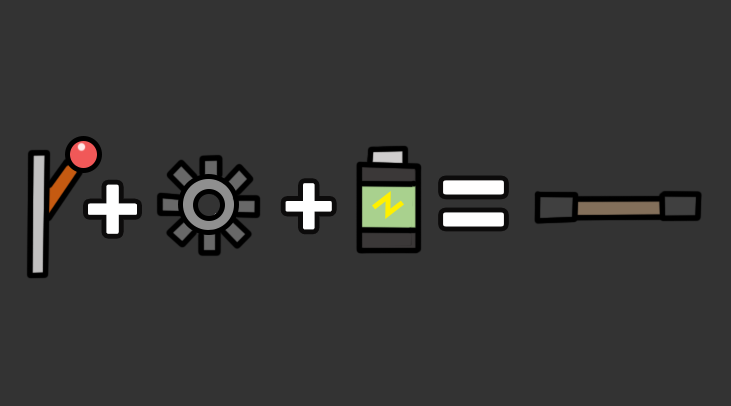
<style>
.page{position:relative;width:731px;height:406px;background:#333333}
.page>*{position:absolute;margin:0}
.t1{font:97px "CookieRun-Regular";letter-spacing:-0.02em;color:#ffffff}
.t2{font:91px "CookieRun-Regular";letter-spacing:-0.02em;color:#ffffff}
.t3{font:120px "CookieRun-Regular";letter-spacing:-0.02em;color:#ffffff}
</style>
<div class="page">
<p class="t1" style="left:88px;top:184px;width:49px;height:50px">+</p>
<p class="t2" style="left:285px;top:183px;width:47px;height:47px">+</p>
<p class="t3" style="left:443px;top:180px;width:61px;height:47px">=</p>
</div>
